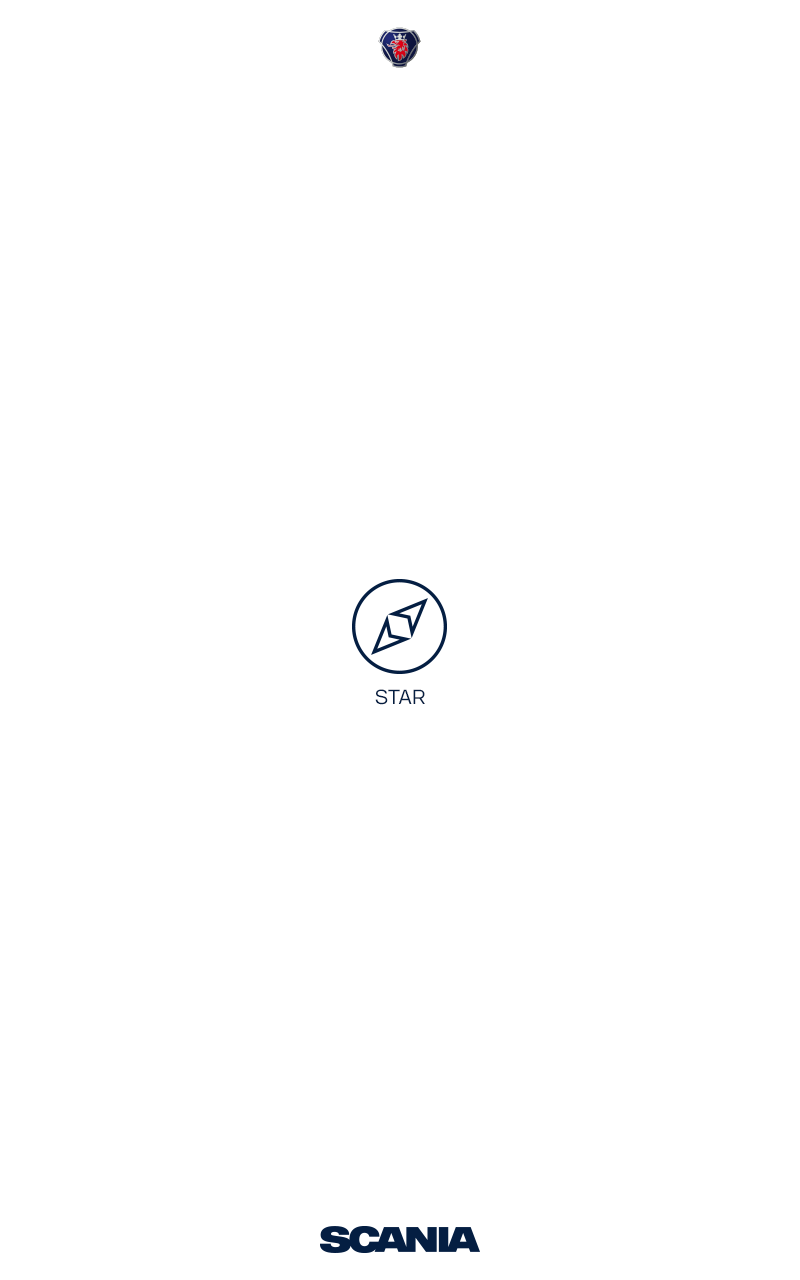
<style>
.page{position:relative;width:800px;height:1280px;background:#ffffff}
.page>*{position:absolute;margin:0}
.t1{font:19.9px "ScaniaSans-Regular";letter-spacing:-0.025em;color:#041e42}
</style>
<div class="page">
<p class="t1" style="left:375px;top:689px;width:50px;height:16px">STAR</p>
</div>
